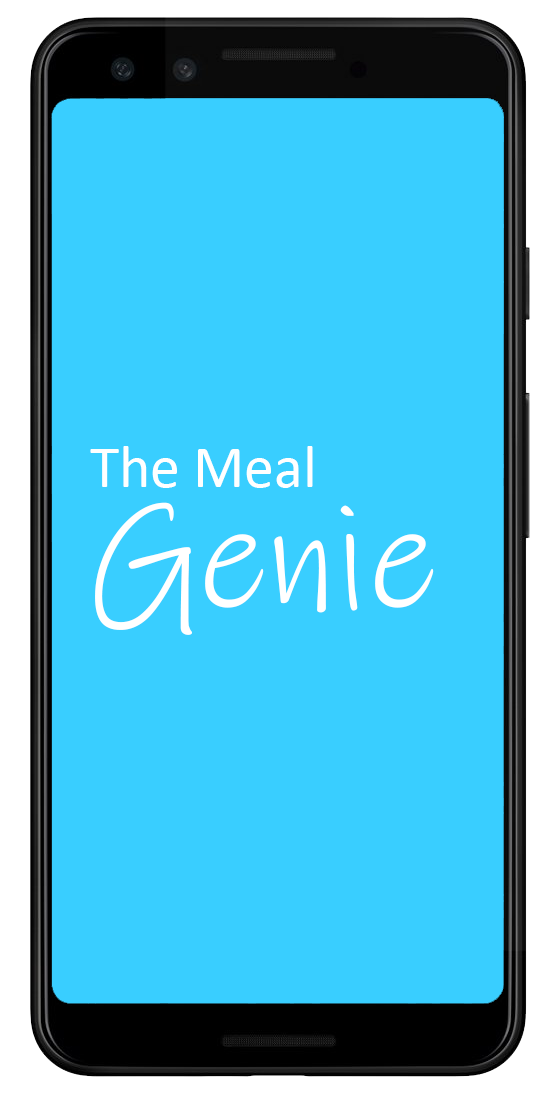
<style>
.page{position:relative;width:557px;height:1094px;background:#39ceff}
.page>*{position:absolute;margin:0}
.t1{font:59.7px/119.4px "Calibri";color:#ffffff}
.t2{font:149.3px/119.4px "InkFree";color:#ffffff}
</style>
<div class="page">
<p class="t1" style="left:90px;top:446px;width:344px;height:189px">The Meal<br><span class="t2">Genie</span></p>
</div>
